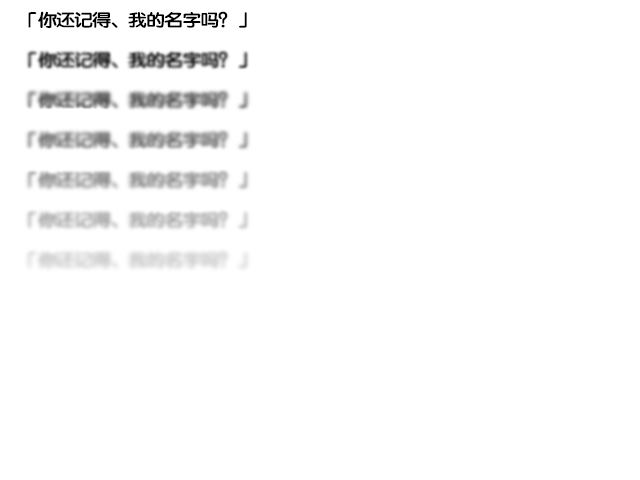
<style>
.page{position:relative;width:640px;height:480px;background:#ffffff}
.page>*{position:absolute;margin:0}
.t1{font:17.2px "FZY4K--GBK1-0";letter-spacing:-0.08em;color:#000000;scale:1.14 1}
</style>
<div class="page">
<p class="t1" style="left:28px;top:11px;width:219px;height:17px">「你还记得、我的名字吗？」</p>
</div>
